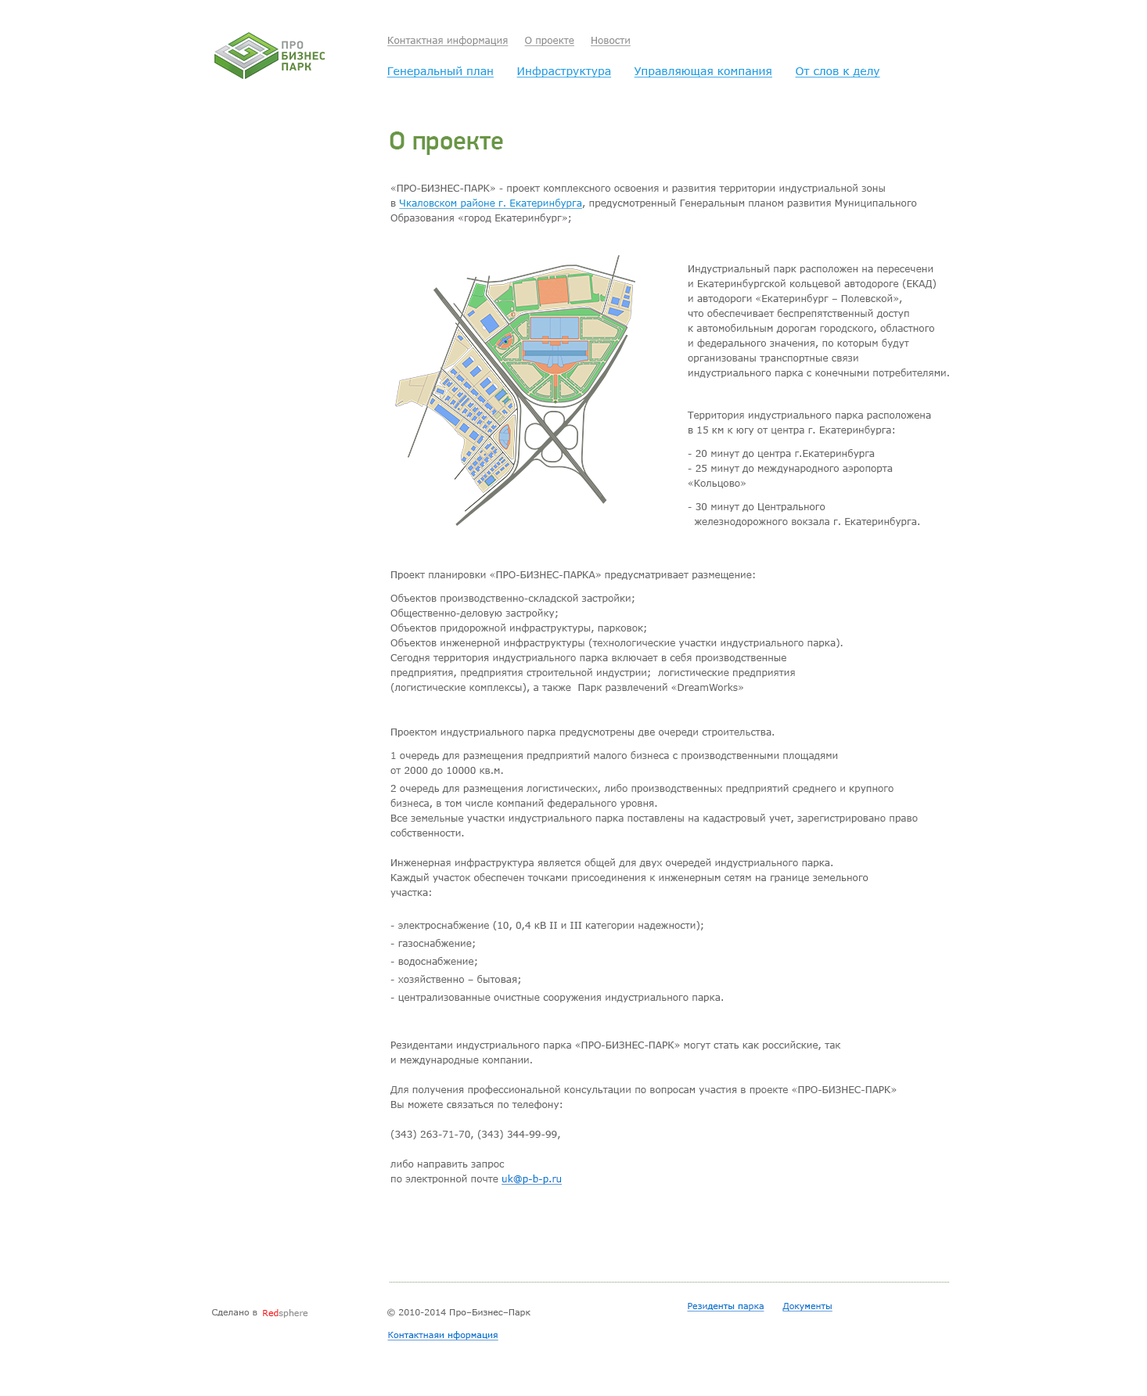
<style>
.page{position:relative;width:1147px;height:1396px;background:#ffffff}
.page>*{position:absolute;margin:0}
.t1{font:9.4px "Verdana";color:#8f8f8f;text-decoration:underline}
.t2{font:11px "Verdana";color:#1ea0e3;text-decoration:underline}
.t3{font:11px "Verdana";color:#1ea0e3}
.t4{font:26.6px "PFDinDisplayPro-Medium";color:#699645}
.t5{font:9.4px/14.9px "Verdana";color:#686868}
.t6{font:9.4px/14.9px "Verdana";color:#1394d7;text-decoration:underline}
.t7{font:9.4px/23.5px "Verdana";color:#686868}
.t8{font:9.4px/18px "Verdana";color:#686868}
.t9{font:9.4px/14.9px "Verdana";color:#0074ce;text-decoration:underline}
.t10{font:8.6px "Verdana";color:#717171}
.t11{font:8.6px "Verdana";color:#8e8e8e}
.t12{font:8.6px "Verdana";color:#888888}
.t13{font:8.6px "Verdana";color:#fa1010}
.t14{font:8.6px "Verdana";color:#666666}
.t15{font:8.6px "Verdana";color:#0074ce;text-decoration:underline}
</style>
<div class="page">
<p class="t1" style="left:387px;top:36px;width:244px;height:10px">Контактная информация     О проекте     Новости</p>
<p class="t2" style="left:387px;top:67px;width:493px;height:11px"><span class="t3">      </span>Генеральный план      Инфраструктура      Управляющая компания      От слов к делу</p>
<p class="t4" style="left:390px;top:131px;width:113px;height:24px">О проекте</p>
<p class="t5" style="left:391px;top:184px;width:527px;height:1001px">«ПРО-БИЗНЕС-ПАРК» - проект комплексного освоения и развития территории индустриальной зоны <br>в <span class="t6">Чкаловском районе г. Екатеринбурга</span>, предусмотренный Генеральным планом развития Муниципального <br>Образования «город Екатеринбург»; <br><br><br><br><br><br><br><br><br><br><br><br><br><br><br><br><br><br><br><br><br><br><br><br>Проект планировки «ПРО-БИЗНЕС-ПАРКА» предусматривает размещение:<br><span class="t7">Объектов производственно-складской застройки;<br></span>Общественно-деловую застройку;<br>Объектов придорожной инфраструктуры, парковок;<br>Объектов инженерной инфраструктуры (технологические участки индустриального парка).<br>Сегодня территория индустриального парка включает в себя производственные<br>предприятия, предприятия строительной индустрии;  логистические предприятия <br>(логистические комплексы), а также  Парк развлечений «DreamWorks»<br><br><br>Проектом индустриального парка предусмотрены две очереди строительства.<br><span class="t7">1 очередь для размещения предприятий малого бизнеса с производственными площадями <br></span>от 2000 до 10000 кв.м. <br><span class="t8">2 очередь для размещения логистических, либо производственных предприятий среднего и крупного <br></span>бизнеса, в том числе компаний федерального уровня.<br>Все земельные участки индустриального парка поставлены на кадастровый учет, зарегистрировано право <br>собственности. <br><br>Инженерная инфраструктура является общей для двух очередей индустриального парка.<br>Каждый участок обеспечен точками присоединения к инженерным сетям на границе земельного <br>участка:<br><br><span class="t8">- электроснабжение (10, 0,4 кВ II и III категории надежности);<br>- газоснабжение; <br>- водоснабжение;<br>- хозяйственно – бытовая;<br>- централизованные очистные сооружения индустриального парка.<br><br></span><br>Резидентами индустриального парка «ПРО-БИЗНЕС-ПАРК» могут стать как российские, так <br>и международные компании.<br><br>Для получения профессиональной консультации по вопросам участия в проекте «ПРО-БИЗНЕС-ПАРК» <br>Вы можете связаться по телефону: <br><br>(343) 263-71-70, (343) 344-99-99, <br><br>либо направить запрос <br>по электронной почте <span class="t9">uk@p-b-p.ru</span></p>
<p class="t5" style="left:688px;top:265px;width:261px;height:113px">Индустриальный парк расположен на пересечени<br>и Екатеринбургской кольцевой автодороге (ЕКАД) <br>и автодороги «Екатеринбург – Полевской», <br>что обеспечивает беспрепятственный доступ <br>к автомобильным дорогам городского, областного <br>и федерального значения, по которым будут <br>организованы транспортные связи <br>индустриального парка с конечными потребителями.</p>
<p class="t5" style="left:687px;top:412px;width:244px;height:115px">Территория индустриального парка расположена <br>в 15 км к югу от центра г. Екатеринбурга: <br><span class="t7">- 20 минут до центра г.Екатеринбурга<br></span>- 25 минут до международного аэропорта <br>«Кольцово»<br><span class="t7">- 30 минут до Центрального <br></span>  железнодорожного вокзала г. Екатеринбурга.</p>
<p class="t10" style="left:212px;top:1309px;width:45px;height:7px">Сделано в</p>
<p class="t11" style="left:263px;top:1309px;width:45px;height:9px"><span class="t12">         </span><span class="t13">Red</span>sphere</p>
<p class="t14" style="left:387px;top:1309px;width:144px;height:8px">© 2010-2014 Про–Бизнес–Парк</p>
<p class="t15" style="left:687px;top:1303px;width:78px;height:9px">Резиденты парка</p>
<p class="t15" style="left:783px;top:1303px;width:50px;height:9px">Документы</p>
<p class="t15" style="left:387px;top:1331px;width:112px;height:10px">Контактнаяи нформация</p>
</div>
